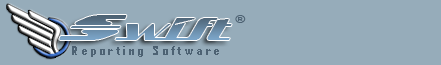
<style>
.page{position:relative;width:441px;height:65px;background:#96acba}
.page>*{position:absolute;margin:0}
.t1{font:27.9px "SandovalSpeed-Regular";letter-spacing:0.025em}
.t2{font:33.4px "SandovalSpeed-Regular";letter-spacing:0.025em}
.t3{font:11.1px "ArialMT";letter-spacing:0.25em;color:#4d6273;scale:1.2 1}
.t4{font:12px "AgencyFB-Bold";letter-spacing:0.25em;color:#4d6273;scale:1.2 1}
</style>
<div class="page">
<p class="t1" style="left:59px;top:15px;width:173px;height:25px"><span class="t2">S</span>wift</p>
<p class="t3" style="left:235px;top:15px;width:11px;height:8px">®</p>
<p class="t4" style="left:72px;top:46px;width:147px;height:11px">Reporting Software</p>
</div>
